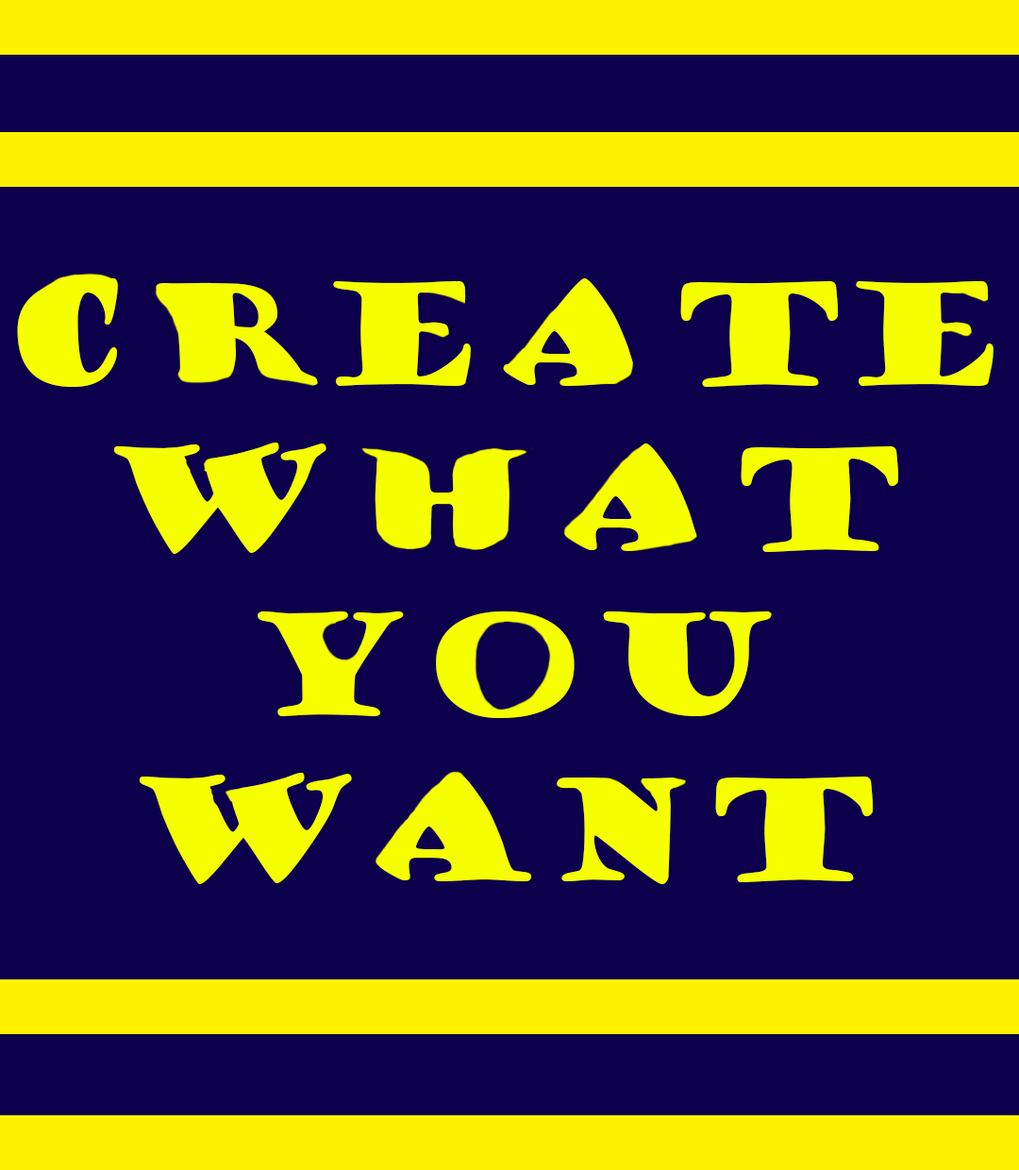
<style>
.page{position:relative;width:1019px;height:1170px;background:#0d004c}
.page>*{position:absolute;margin:0}
.t1{font:137.6px "GoudyStout";color:#f6ff00}
</style>
<div class="page">
<p class="t1" style="left:17px;top:278px;width:977px;height:606px;text-align:center">CREATE<br>WHAT<br>YOU<br>WANT</p>
</div>
